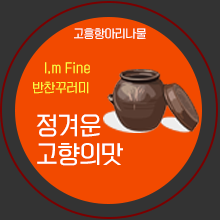
<style>
.page{position:relative;width:220px;height:220px;background:#f24a00}
.page>*{position:absolute;margin:0}
.t1{font:11px "KoreanYNSJG3-R";color:#ffffff}
.t2{font:12px/19.8px "KoreanYNSJG3-R";color:#fafc42}
.t3{font:23px/28.6px "KoreanYNSJG3-R";color:#ffffff}
</style>
<div class="page">
<p class="t1" style="left:74px;top:28px;width:72px;height:11px">고흥항아리나물</p>
<p class="t2" style="left:33px;top:62px;width:57px;height:32px">I,m Fine<br>반찬꾸러미</p>
<p class="t3" style="left:36px;top:114px;width:87px;height:52px">정겨운<br>고향의맛</p>
</div>
